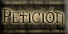
<style>
.page{position:relative;width:68px;height:34px}
.page>*{position:absolute;margin:0}
.t1{font:18px "Morpheus"}
</style>
<div class="page">
<p class="t1" style="left:2px;top:8px;width:62px;height:18px">Petición</p>
</div>
